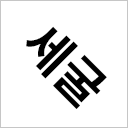
<style>
.page{position:relative;width:128px;height:128px;background:#ffffff}
.page>*{position:absolute;margin:0}
.t1{font:50px "NotoSansCJKkr-Bold";letter-spacing:-0.025em;color:#000000}
</style>
<div class="page">
<p class="t1" style="left:26px;top:26px;width:81px;height:83px;rotate:45deg">세굴</p>
</div>
